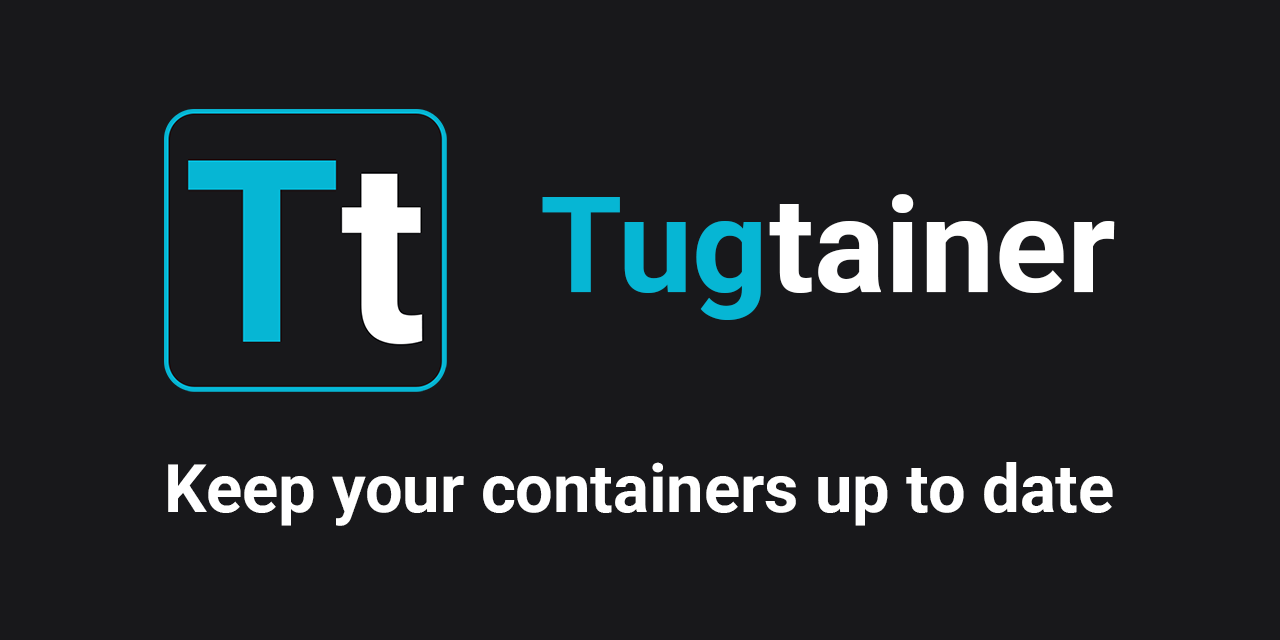
<style>
.page{position:relative;width:1280px;height:640px;background:#18181b}
.page>*{position:absolute;margin:0}
.t1{font:133.3px "Roboto-Bold";color:#ffffff}
.t2{font:133.3px "Roboto-Bold";color:#06b6d4}
.t3{font:66.7px "Roboto-Bold";color:#ffffff}
</style>
<div class="page">
<p class="t1" style="left:542px;top:194px;width:573px;height:126px"><span class="t2">Tug</span>tainer</p>
<p class="t3" style="left:168px;top:462px;width:945px;height:64px">Keep your containers up to date</p>
</div>
